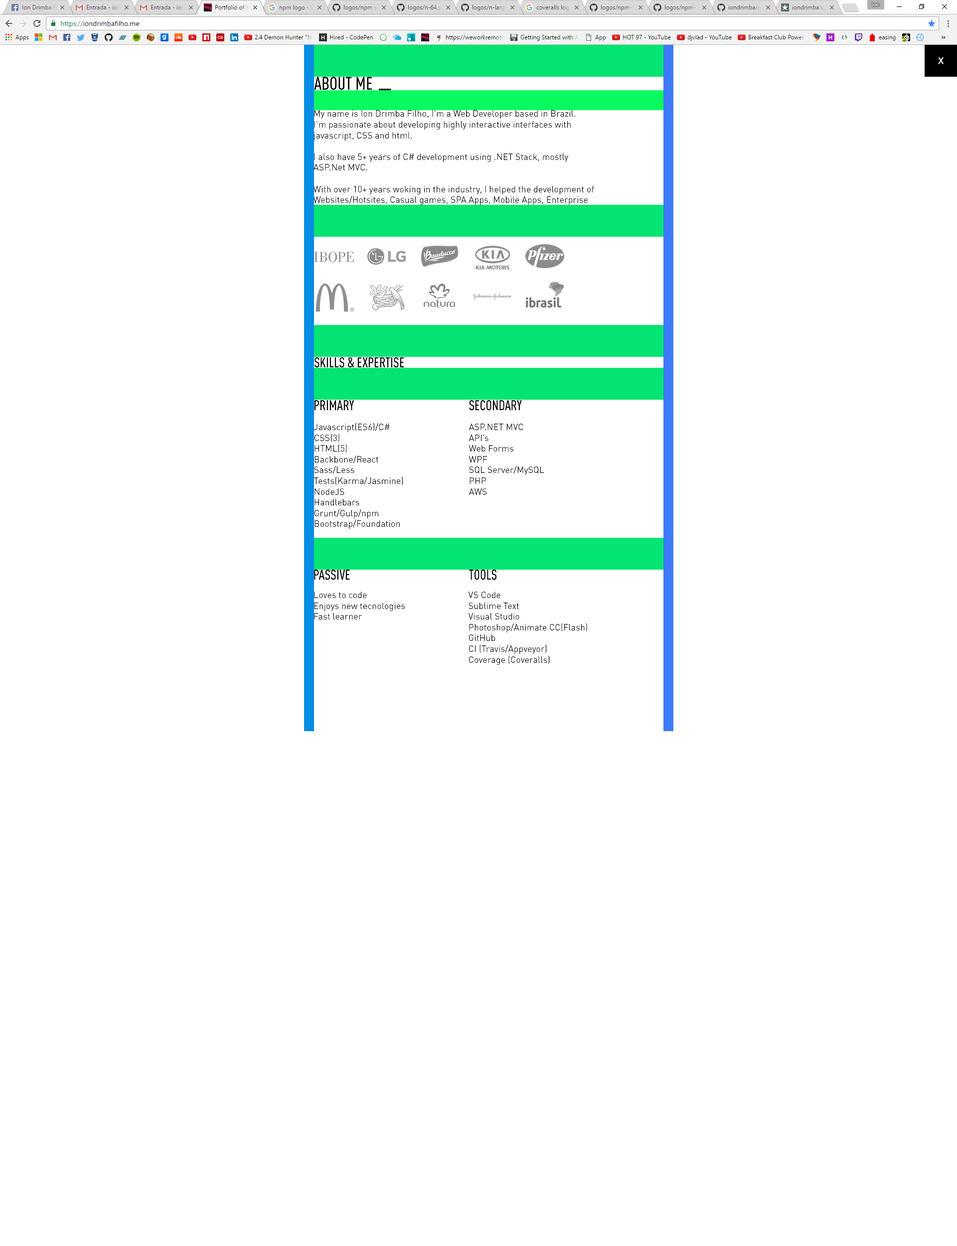
<style>
.page{position:relative;width:957px;height:1246px;background:#ffffff}
.page>*{position:absolute;margin:0}
.t1{font:15px "OpenSans";color:#fbf8f8;font-variant:small-caps;font-weight:bold}
.t2{font:17.9px "DINPro-CondensedMedium";color:#020202;text-transform:uppercase}
.t3{font:9px "DINPro";color:#020202}
.t4{font:14px "DINPro-CondensedMedium";color:#020202;text-transform:uppercase}
</style>
<div class="page">
<p class="t1" style="left:938px;top:57px;width:6px;height:7px">X</p>
<p class="t2" style="left:314px;top:77px;width:58px;height:13px">ABOUT ME</p>
<p class="t3" style="left:313px;top:110px;width:281px;height:106px">My name is Ion Drimba Filho, I'm a Web Developer based in Brazil. <br>I’m passionate about developing highly interactive interfaces with <br>javascript, CSS and html.<br><br>I also have 5+ years of C# development using .NET Stack, mostly <br>ASP.Net MVC.<br><br>With over 10+ years woking in the industry, I helped the development of <br>Websites/Hotsites, Casual games, SPA Apps, Mobile Apps, Enterprise<br>Systems and API’s for companies like:</p>
<p class="t4" style="left:315px;top:357px;width:89px;height:11px">Skills &amp; Expertise</p>
<p class="t4" style="left:314px;top:400px;width:40px;height:10px">PRIMARY</p>
<p class="t4" style="left:469px;top:400px;width:53px;height:11px">SECONDARY</p>
<p class="t3" style="left:314px;top:423px;width:89px;height:106px">Javascript(ES6)/C#<br>CSS(3)<br>HTML(5)<br>Backbone/React<br>Sass/Less<br>Tests(Karma/Jasmine)<br>NodeJS<br>Handlebars<br>Grunt/Gulp/npm<br>Bootstrap/Foundation</p>
<p class="t3" style="left:469px;top:424px;width:75px;height:71px">ASP.NET MVC<br>API’s<br>Web Forms<br>WPF<br>SQL Server/MySQL<br>PHP<br>AWS</p>
<p class="t4" style="left:314px;top:569px;width:36px;height:11px">PASSIVE</p>
<p class="t4" style="left:469px;top:569px;width:27px;height:11px">tools</p>
<p class="t3" style="left:314px;top:592px;width:91px;height:28px">Loves to code<br>Enjoys new tecnologies<br>Fast learner</p>
<p class="t3" style="left:468px;top:592px;width:119px;height:73px">VS Code<br>Sublime Text<br>Visual Studio<br>Photoshop/Animate CC(Flash)<br>GitHub<br>CI (Travis/Appveyor)<br>Coverage (Coveralls)</p>
</div>
